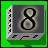
<style>
.page{position:relative;width:48px;height:48px;background:#00e600}
.page>*{position:absolute;margin:0}
.t1{font:30px "LucidaHandwriting-Italic";color:#000000}
</style>
<div class="page">
<p class="t1" style="left:20px;top:8px;width:17px;height:22px">8</p>
</div>
